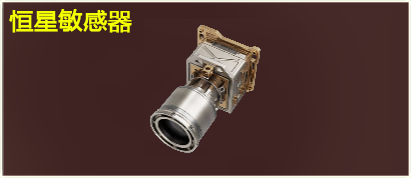
<style>
.page{position:relative;width:411px;height:178px}
.page>*{position:absolute;margin:0}
.t1{font:24px "MicrosoftYaHeiUI";color:#f4ff00;font-weight:bold}
</style>
<div class="page">
<p class="t1" style="left:9px;top:9px;width:123px;height:24px">恒星敏感器</p>
</div>
